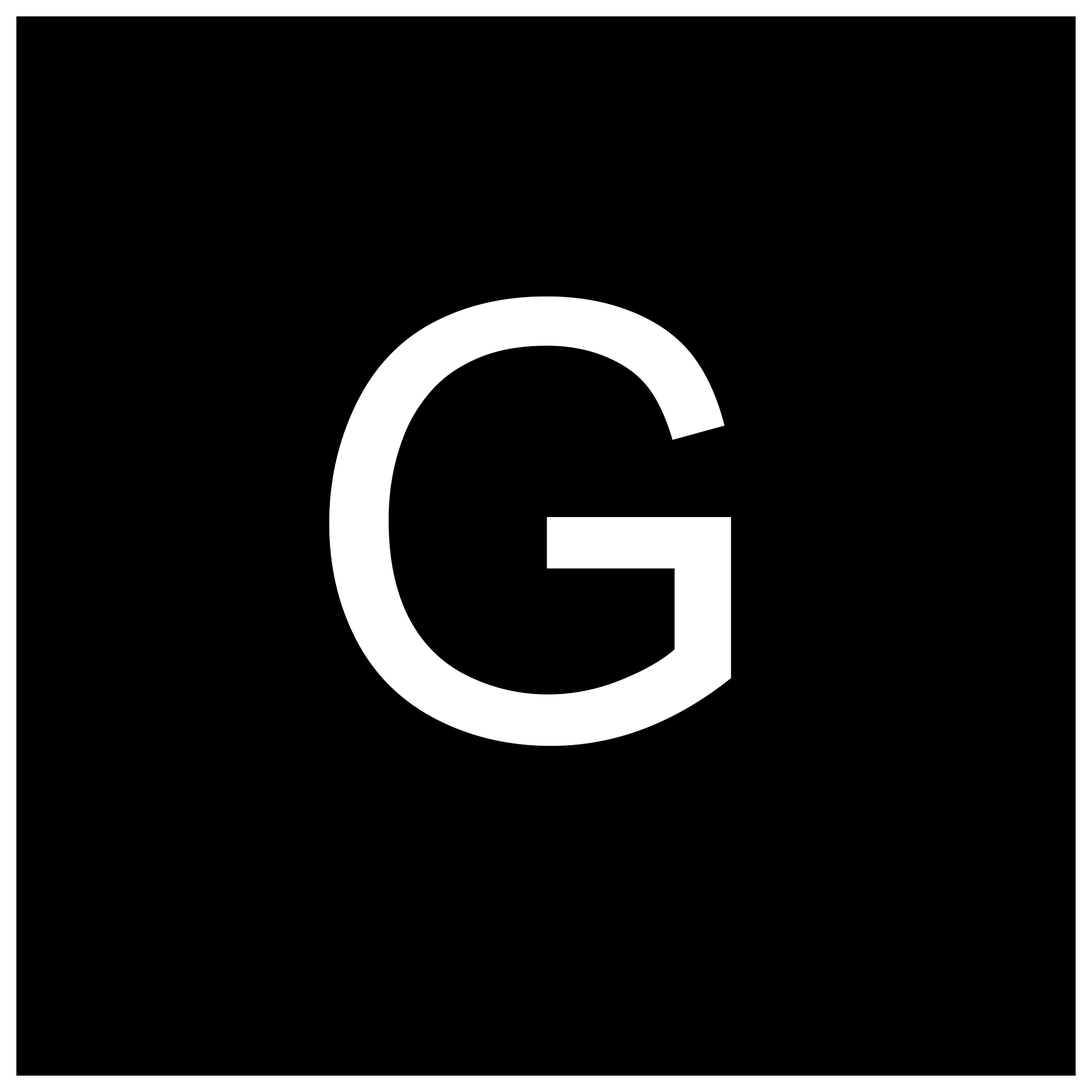
<style>
.page{position:relative;width:1092px;height:1092px;background:#000000}
.page>*{position:absolute;margin:0}
.t1{font:606.7px "ArialMT";color:#ffffff}
</style>
<div class="page">
<p class="t1" style="left:329px;top:296px;width:402px;height:450px">G</p>
</div>
